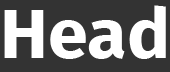
<style>
.page{position:relative;width:170px;height:72px;background:#333333}
.page>*{position:absolute;margin:0}
.t1{font:68.4px "FiraSans-Bold";color:#ffffff;scale:1.05 1}
</style>
<div class="page">
<p class="t1" style="left:4px;top:5px;width:162px;height:54px">Head</p>
</div>
